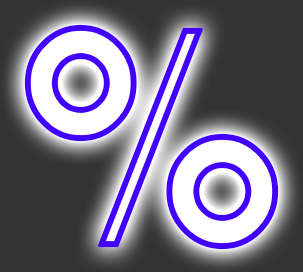
<style>
.page{position:relative;width:303px;height:272px;background:#333333}
.page>*{position:absolute;margin:0}
.t1{font:78px "Bauhaus93";letter-spacing:-0.07em;font-weight:bold;scale:0.97 1}
</style>
<div class="page">
<p class="t1" style="left:24px;top:24px;width:255px;height:226px;text-align:center">%</p>
</div>
